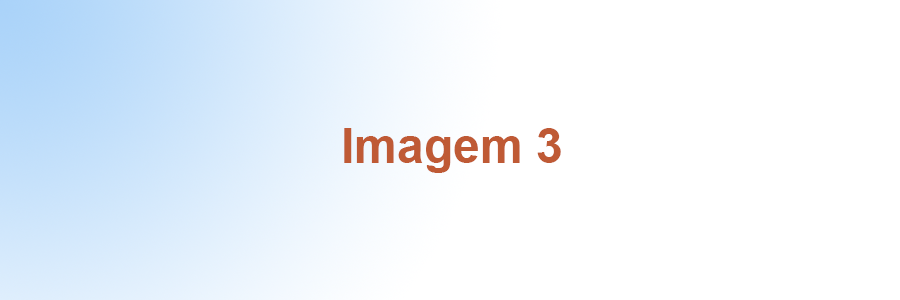
<style>
.page{position:relative;width:900px;height:300px;background:#ffffff}
.page>*{position:absolute;margin:0}
.t1{font:48px "Arial-BoldMT";color:#bf5a35}
</style>
<div class="page">
<p class="t1" style="left:344px;top:128px;width:217px;height:45px">Imagem 3</p>
</div>
